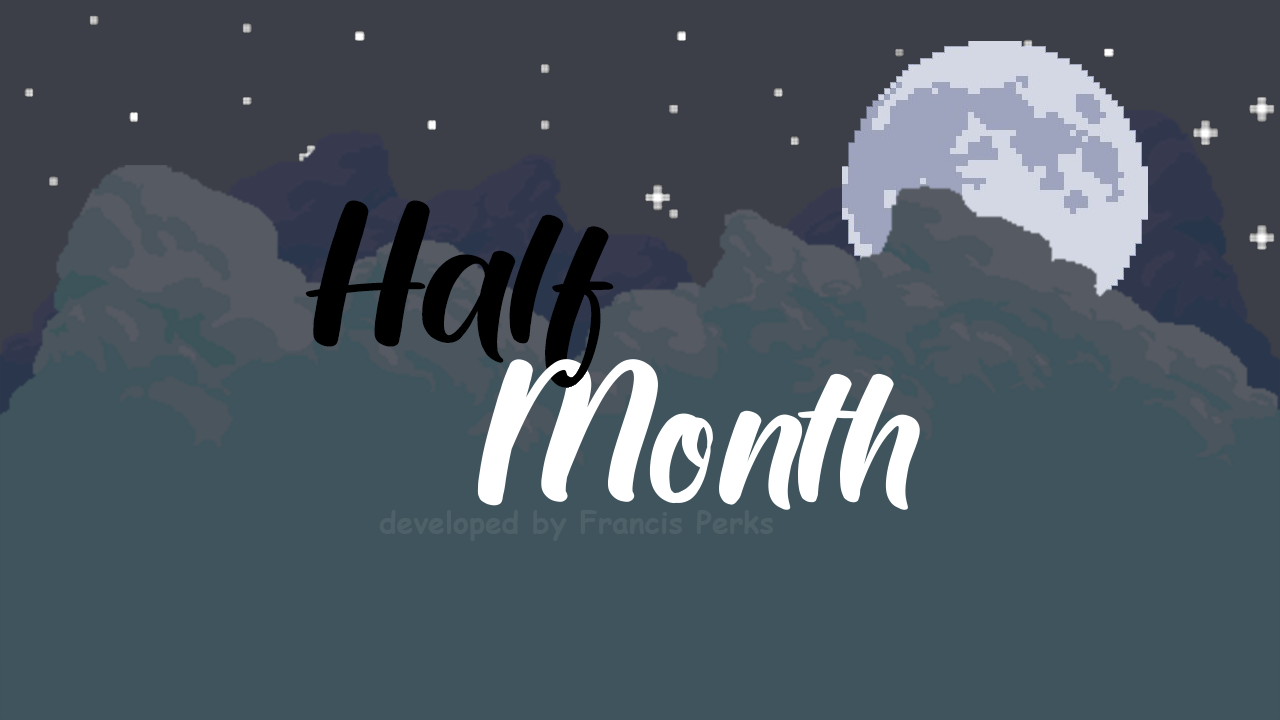
<style>
.page{position:relative;width:1280px;height:720px;background:#3f545c}
.page>*{position:absolute;margin:0}
.t1{font:175px "CreamPeach-Regular";color:#000000}
.t2{font:30px "ComicSansMS-Bold";color:#4e6168}
</style>
<div class="page">
<p class="t1" style="left:305px;top:200px;width:309px;height:188px">Half</p>
<p class="t2" style="left:379px;top:510px;width:394px;height:31px">developed by Francis Perks</p>
</div>
